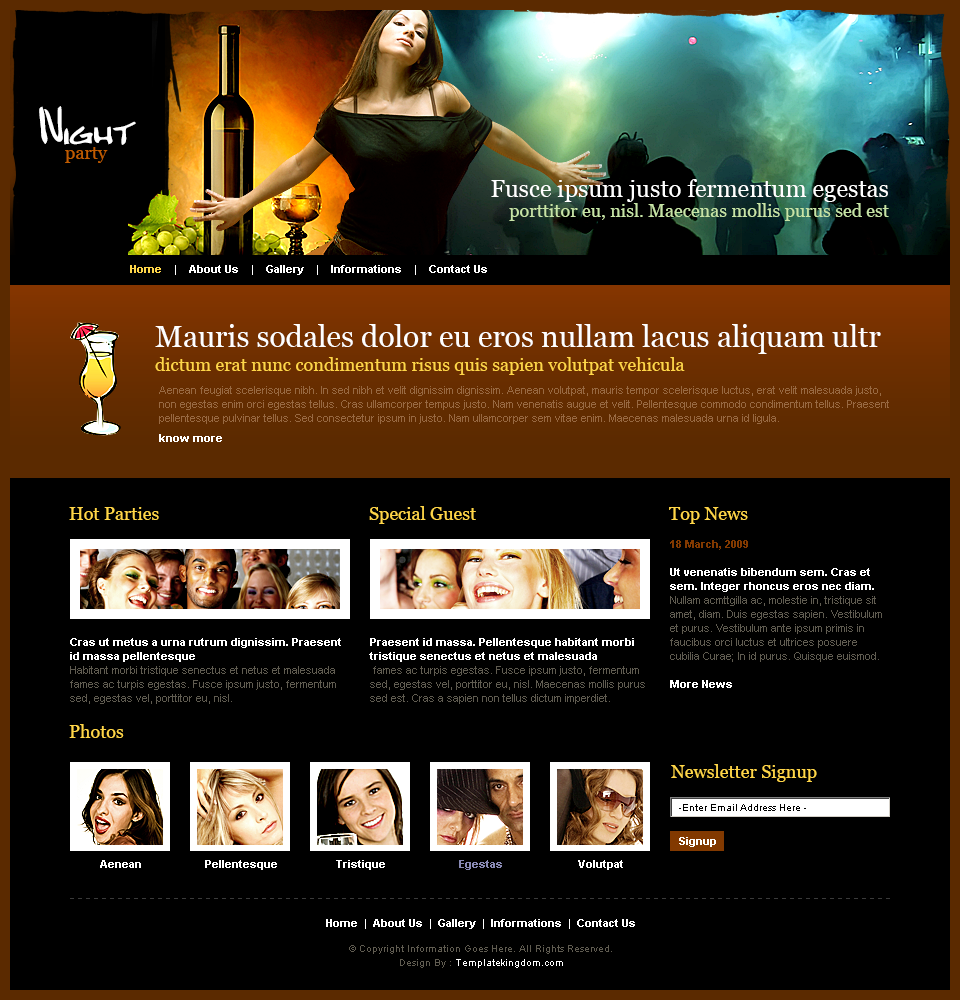
<style>
.page{position:relative;width:960px;height:1000px;background:#000000}
.page>*{position:absolute;margin:0}
.t1{font:48px "Bobcat";color:#ffffff}
.t2{font:18px "Georgia";color:#c05c00}
.t3{font:18px/20px "Georgia";color:#c7e4a6}
.t4{font:24px/20px "Georgia";color:#ffffff}
.t5{font:11px "Arial-BoldMT";color:#ffffff}
.t6{font:11px "Arial-BoldMT";color:#ffd649}
.t7{font:18px/24px "Georgia";color:#ffd649}
.t8{font:30px/24px "Georgia";color:#ffffff}
.t9{font:11px/14px "ArialMT";color:#986942}
.t10{font:11px/20px "Arial-BoldMT";color:#ffffff}
.t11{font:18px "Georgia";color:#ffd649}
.t12{font:11px/14px "ArialMT";color:#605c51}
.t13{font:11px/14px "Arial-BoldMT";color:#823900}
.t14{font:11px/14px "Arial-BoldMT";color:#ffffff}
.t15{font:10px "ArialMT";color:#000000}
.t16{font:11px "Arial-BoldMT";color:#898ab5}
.t17{font:10px/14px "ArialMT";color:#605c51}
.t18{font:10px/14px "ArialMT";color:#ffffff}
</style>
<div class="page">
<p class="t1" style="left:39px;top:106px;width:97px;height:39px">Night</p>
<p class="t2" style="left:65px;top:147px;width:43px;height:16px">party</p>
<p class="t3" style="left:491px;top:179px;width:398px;height:42px;text-align:right"><span class="t4">Fusce ipsum justo fermentum egestas<br></span>porttitor eu, nisl. Maecenas mollis purus sed est</p>
<p class="t5" style="left:130px;top:265px;width:357px;height:10px"><span class="t6">Home</span>    |    About Us    |    Gallery    |    Informations    |    Contact Us</p>
<p class="t7" style="left:155px;top:324px;width:726px;height:51px"><span class="t8">Mauris sodales dolor eu eros nullam lacus aliquam ultr<br></span>dictum erat nunc condimentum risus quis sapien volutpat vehicula</p>
<p class="t9" style="left:159px;top:386px;width:730px;height:56px">Aenean feugiat scelerisque nibh. In sed nibh et velit dignissim dignissim. Aenean volutpat, mauris tempor scelerisque luctus, erat velit malesuada justo, non egestas enim orci egestas tellus. Cras ullamcorper tempus justo. Nam venenatis augue et velit. Pellentesque commodo condimentum tellus. Praesent pellentesque pulvinar tellus. Sed consectetur ipsum in justo. Nam ullamcorper sem vitae enim. Maecenas malesuada urna id ligula.<br><span class="t10">know more</span></p>
<p class="t11" style="left:69px;top:507px;width:90px;height:13px">Hot Parties</p>
<p class="t11" style="left:369px;top:506px;width:107px;height:18px">Special Guest</p>
<p class="t11" style="left:669px;top:507px;width:79px;height:17px">Top News</p>
<p class="t12" style="left:670px;top:540px;width:212px;height:148px"><span class="t13">18 March, 2009<br><br></span><span class="t14">Ut venenatis bibendum sem. Cras et sem. Integer rhoncus eros nec diam.</span> Nullam acmttgilla ac, molestie in, tristique sit amet, diam. Duis egestas sapien. Vestibulum et purus. Vestibulum ante ipsum primis in faucibus orci luctus et ultrices posuere cubilia Curae; In id purus. Quisque euismod.<br><br><span class="t14">More News</span></p>
<p class="t12" style="left:70px;top:638px;width:271px;height:66px"><span class="t14">Cras ut metus a urna rutrum dignissim. Praesent id massa pellentesque</span><br>Habitant morbi tristique senectus et netus et malesuada fames ac turpis egestas. Fusce ipsum justo, fermentum sed, egestas vel, porttitor eu, nisl.</p>
<p class="t12" style="left:369px;top:638px;width:276px;height:66px"><span class="t14">Praesent id massa. Pellentesque habitant morbi tristique senectus et netus et malesuada<br></span> fames ac turpis egestas. Fusce ipsum justo, fermentum sed, egestas vel, porttitor eu, nisl. Maecenas mollis purus sed est. Cras a sapien non tellus dictum imperdiet.</p>
<p class="t11" style="left:69px;top:724px;width:55px;height:14px">Photos</p>
<p class="t11" style="left:671px;top:764px;width:146px;height:18px">Newsletter Signup</p>
<p class="t15" style="left:679px;top:804px;width:127px;height:7px">-Enter Email Address Here -</p>
<p class="t5" style="left:679px;top:837px;width:37px;height:10px">Signup</p>
<p class="t5" style="left:100px;top:860px;width:41px;height:8px">Aenean</p>
<p class="t5" style="left:205px;top:860px;width:72px;height:10px">Pellentesque</p>
<p class="t5" style="left:336px;top:860px;width:49px;height:10px">Tristique</p>
<p class="t16" style="left:459px;top:860px;width:43px;height:10px">Egestas</p>
<p class="t5" style="left:578px;top:860px;width:45px;height:10px">Volutpat</p>
<p class="t5" style="left:326px;top:919px;width:309px;height:10px">Home  |  About Us  |  Gallery  |  Informations  |  Contact Us</p>
<p class="t17" style="left:349px;top:945px;width:263px;height:23px;text-align:center">© Copyright Information Goes Here. All Rights Reserved.<br>Design By :<span class="t18"> Templatekingdom.com</span></p>
</div>
